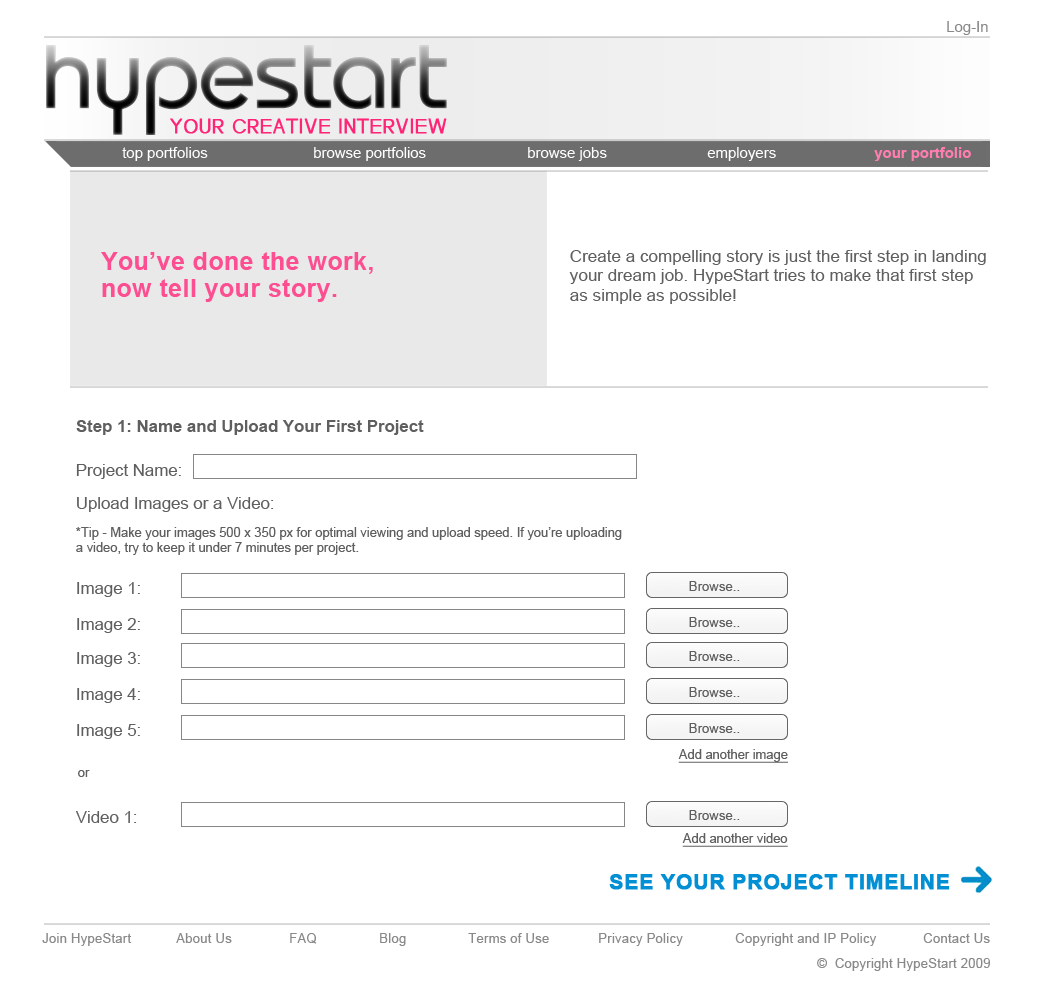
<style>
.page{position:relative;width:1051px;height:981px;background:#ffffff}
.page>*{position:absolute;margin:0}
.t1{font:14.9px "ArialMT";color:#898989}
.t2{font:20.1px "HeoMay11";letter-spacing:0.02em;color:#fe2577;font-weight:bold}
.t3{font:14.9px "ArialMT";color:#ffffff}
.t4{font:14.9px "Arial-BoldMT";color:#ff7eaf}
.t5{font:24.8px/27.7px "Arial-BoldMT";letter-spacing:0.02em;color:#fc4e90}
.t6{font:17px/19px "ArialMT";color:#5f5f5f}
.t7{font:16.8px "Arial-BoldMT";color:#5f5f5f}
.t8{font:16.8px "ArialMT";color:#5f5f5f}
.t9{font:12.9px/14.4px "ArialMT";color:#5f5f5f}
.t10{font:13.2px "ArialMT";color:#5f5f5f}
.t11{font:12.9px "ArialMT";color:#5f5f5f;text-decoration:underline}
.t12{font:12.9px "ArialMT";color:#5f5f5f}
.t13{font:21px "Arial-BoldMT";letter-spacing:0.02em;color:#028fd4;font-weight:bold}
.t14{font:13px "ArialMT";letter-spacing:0.02em;color:#898989}
</style>
<div class="page">
<p class="t1" style="left:947px;top:21px;width:41px;height:14px">Log-In</p>
<p class="t2" style="left:170px;top:118px;width:277px;height:16px">YOUR CREATIVE INTERVIEW</p>
<p class="t3" style="left:122px;top:147px;width:86px;height:14px">top portfolios</p>
<p class="t3" style="left:314px;top:147px;width:112px;height:14px">browse portfolios</p>
<p class="t3" style="left:528px;top:147px;width:79px;height:14px">browse jobs</p>
<p class="t3" style="left:707px;top:147px;width:69px;height:14px">employers</p>
<p class="t4" style="left:874px;top:147px;width:97px;height:14px">your portfolio</p>
<p class="t5" style="left:101px;top:252px;width:272px;height:50px">You’ve done the work, <br>now tell your story.</p>
<p class="t6" style="left:569px;top:250px;width:417px;height:54px">Create a compelling story is just the first step in landing <br>your dream job. HypeStart tries to make that first step <br>as simple as possible!</p>
<p class="t7" style="left:76px;top:420px;width:348px;height:15px">Step 1: Name and Upload Your First Project</p>
<p class="t8" style="left:76px;top:464px;width:105px;height:15px">Project Name:</p>
<p class="t8" style="left:77px;top:497px;width:197px;height:15px">Upload Images or a Video:</p>
<p class="t9" style="left:76px;top:527px;width:546px;height:28px">*Tip - Make your images 500 x 350 px for optimal viewing and upload speed. If you’re uploading<br>a video, try to keep it under 7 minutes per project.</p>
<p class="t8" style="left:77px;top:582px;width:63px;height:15px">Image 1:</p>
<p class="t10" style="left:689px;top:581px;width:51px;height:10px">Browse..</p>
<p class="t10" style="left:689px;top:617px;width:51px;height:10px">Browse..</p>
<p class="t8" style="left:77px;top:618px;width:63px;height:15px">Image 2:</p>
<p class="t8" style="left:77px;top:652px;width:63px;height:15px">Image 3:</p>
<p class="t10" style="left:689px;top:651px;width:51px;height:10px">Browse..</p>
<p class="t8" style="left:77px;top:688px;width:63px;height:15px">Image 4:</p>
<p class="t10" style="left:689px;top:687px;width:51px;height:10px">Browse..</p>
<p class="t8" style="left:77px;top:724px;width:63px;height:15px">Image 5:</p>
<p class="t10" style="left:689px;top:723px;width:51px;height:10px">Browse..</p>
<p class="t11" style="left:678px;top:749px;width:110px;height:14px">Add another image</p>
<p class="t12" style="left:78px;top:770px;width:12px;height:7px">or</p>
<p class="t8" style="left:76px;top:811px;width:61px;height:12px">Video 1:</p>
<p class="t10" style="left:689px;top:810px;width:51px;height:10px">Browse..</p>
<p class="t11" style="left:682px;top:833px;width:106px;height:14px">Add another video</p>
<p class="t13" style="left:609px;top:874px;width:341px;height:16px">SEE YOUR PROJECT TIMELINE</p>
<p class="t14" style="left:42px;top:933px;width:90px;height:13px">Join HypeStart</p>
<p class="t14" style="left:176px;top:933px;width:56px;height:10px">About Us</p>
<p class="t14" style="left:290px;top:933px;width:27px;height:11px">FAQ</p>
<p class="t14" style="left:380px;top:933px;width:26px;height:13px">Blog</p>
<p class="t14" style="left:468px;top:933px;width:81px;height:10px">Terms of Use</p>
<p class="t14" style="left:599px;top:933px;width:84px;height:13px">Privacy Policy</p>
<p class="t14" style="left:735px;top:933px;width:142px;height:13px">Copyright and IP Policy</p>
<p class="t14" style="left:923px;top:933px;width:67px;height:10px">Contact Us</p>
<p class="t14" style="left:817px;top:958px;width:173px;height:13px">©  Copyright HypeStart 2009</p>
</div>
